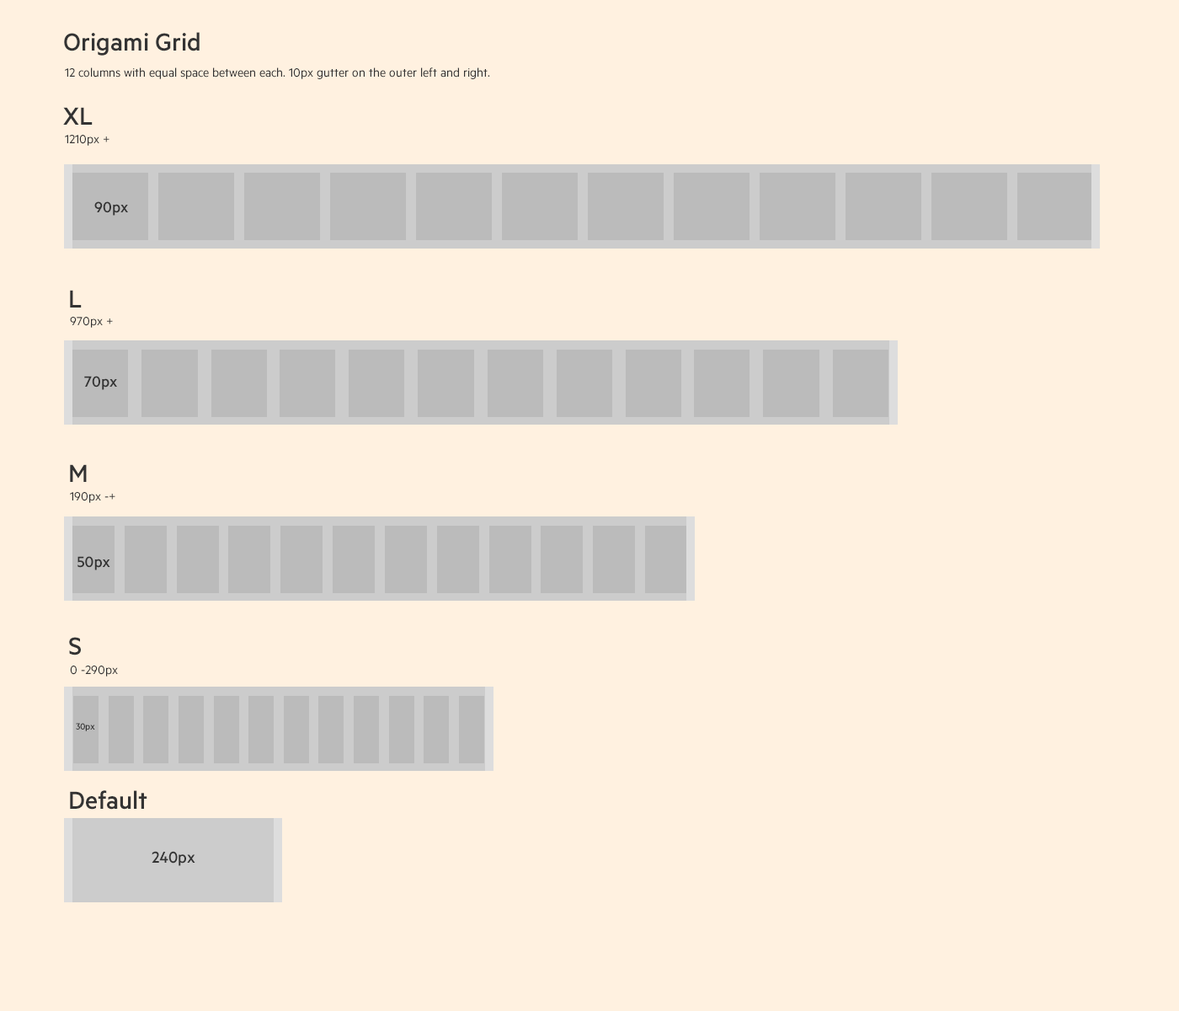
<style>
.page{position:relative;width:1179px;height:1011px;background:#fff1e0}
.page>*{position:absolute;margin:0}
.t1{font:27.8px "Metric-Medium";color:#333333}
.t2{font:13.5px "Metric-Regular";color:#333333}
.t3{font:16.8px "Metric-Medium";color:#333333}
.t4{font:10.1px "Metric-Medium";color:#333333}
.t5{font:17.7px "Metric-Medium";color:#333333}
</style>
<div class="page">
<p class="t1" style="left:64px;top:32px;width:136px;height:24px">Origami Grid</p>
<p class="t2" style="left:65px;top:67px;width:425px;height:12px">12 columns with equal space between each. 10px gutter on the outer left and right.</p>
<p class="t1" style="left:63px;top:107px;width:30px;height:18px">XL</p>
<p class="t2" style="left:65px;top:135px;width:45px;height:11px">1210px +</p>
<p class="t3" style="left:94px;top:201px;width:34px;height:15px">90px</p>
<p class="t1" style="left:70px;top:290px;width:12px;height:18px">L</p>
<p class="t2" style="left:70px;top:317px;width:43px;height:11px">970px +</p>
<p class="t3" style="left:84px;top:376px;width:33px;height:14px">70px</p>
<p class="t1" style="left:70px;top:464px;width:17px;height:18px">M</p>
<p class="t2" style="left:70px;top:492px;width:45px;height:11px">190px -+</p>
<p class="t3" style="left:78px;top:556px;width:32px;height:14px">50px</p>
<p class="t1" style="left:69px;top:637px;width:12px;height:18px">S</p>
<p class="t2" style="left:70px;top:666px;width:48px;height:11px">0 -290px</p>
<p class="t4" style="left:76px;top:723px;width:19px;height:8px">30px</p>
<p class="t1" style="left:70px;top:790px;width:77px;height:20px">Default</p>
<p class="t5" style="left:152px;top:851px;width:43px;height:15px">240px</p>
</div>
